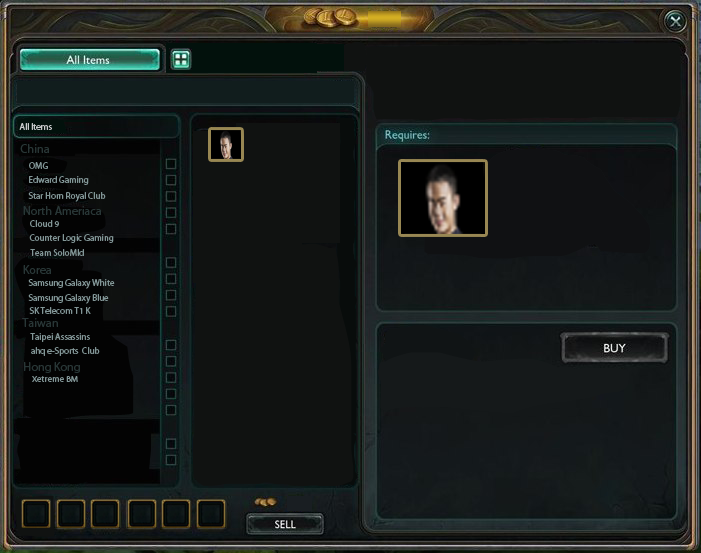
<style>
.page{position:relative;width:701px;height:553px}
.page>*{position:absolute;margin:0}
.t1{font:9px "MyriadPro-Regular";color:#cacbcd}
.t2{font:12px "MyriadPro-Regular";color:#283636}
.t3{font:9px "MyriadPro-Regular";color:#829697}
.t4{font:8.5px "MyriadPro-Regular";color:#829697;scale:1.06 1}
</style>
<div class="page">
<p class="t1" style="left:19px;top:123px;width:33px;height:7px">All Items</p>
<p class="t2" style="left:20px;top:144px;width:29px;height:9px">China</p>
<p class="t3" style="left:29px;top:162px;width:19px;height:7px">OMG</p>
<p class="t3" style="left:29px;top:176px;width:60px;height:9px">Edward Gaming</p>
<p class="t3" style="left:28px;top:192px;width:78px;height:10px">Star Horn Royal Club</p>
<p class="t2" style="left:23px;top:206px;width:78px;height:9px">North Ameriaca</p>
<p class="t3" style="left:30px;top:220px;width:29px;height:7px">Cloud 9</p>
<p class="t3" style="left:29px;top:234px;width:85px;height:9px">Counter Logic Gaming</p>
<p class="t3" style="left:30px;top:249px;width:54px;height:7px">Team SoloMId</p>
<p class="t2" style="left:23px;top:265px;width:28px;height:9px">Korea</p>
<p class="t3" style="left:28px;top:279px;width:87px;height:10px">Samsung Galaxy White</p>
<p class="t3" style="left:28px;top:294px;width:81px;height:10px">Samsung Galaxy Blue</p>
<p class="t2" style="left:22px;top:318px;width:36px;height:9px">Taiwan</p>
<p class="t3" style="left:29px;top:307px;width:62px;height:7px">SK Telecom T1 K</p>
<p class="t3" style="left:30px;top:333px;width:60px;height:9px">Taipei Assassins</p>
<p class="t3" style="left:31px;top:347px;width:69px;height:9px">ahq e-Sports  Club</p>
<p class="t2" style="left:24px;top:362px;width:56px;height:11px">Hong Kong</p>
<p class="t4" style="left:32px;top:376px;width:46px;height:6px">Xetreme BM</p>
</div>
